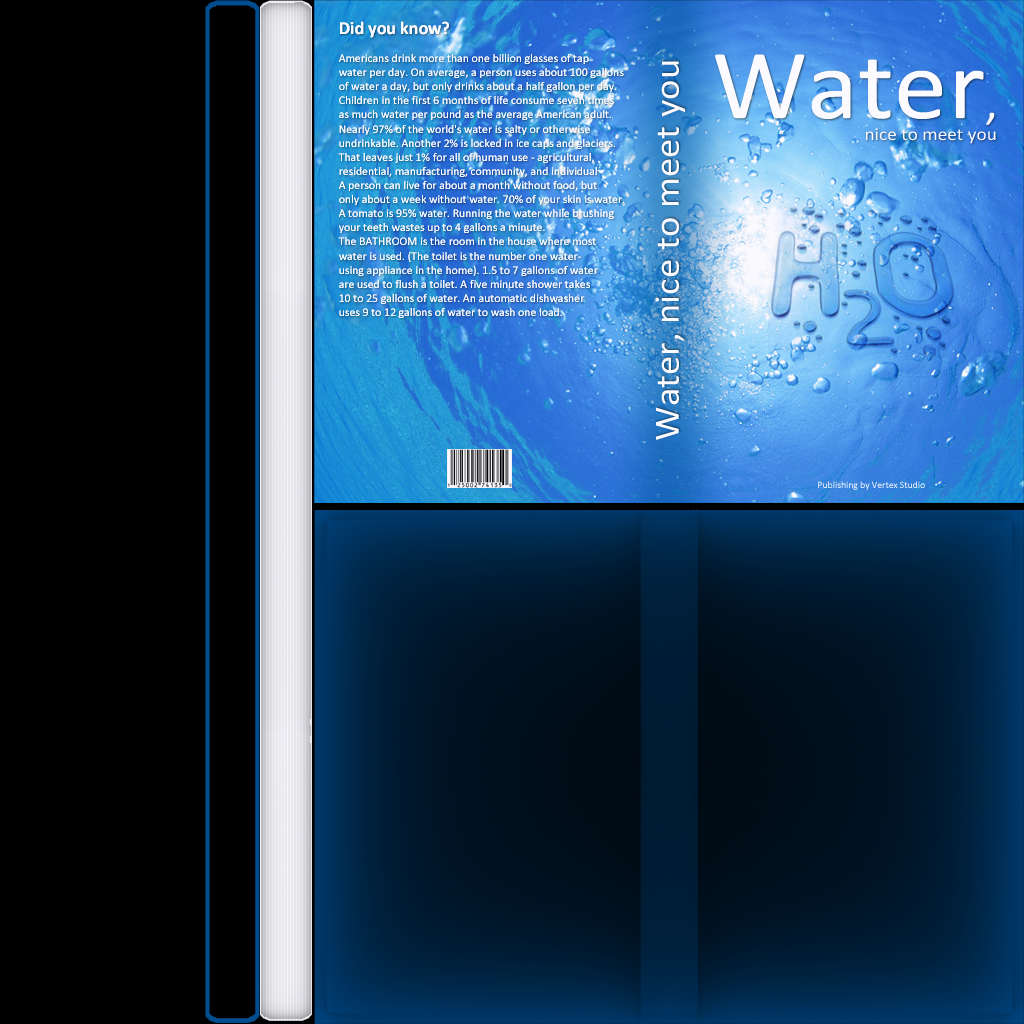
<style>
.page{position:relative;width:1024px;height:1024px;background:#000000}
.page>*{position:absolute;margin:0}
.t1{font:11.8px "Calibri";color:#ffffff}
.t2{font:18px "Calibri-Bold";color:#ffffff}
.t3{font:18px "Calibri";color:#ffffff;scale:1.07 1}
.t4{font:100px "Calibri";color:#ffffff;scale:1.07 1}
.t5{font:47.6px "Calibri";color:#ffffff;scale:1.07 1}
.t6{font:36px "Calibri";color:#ffffff;scale:1.07 1}
.t7{font:9.7px "Calibri";color:#ffffff}
</style>
<div class="page">
<p class="t1" style="left:338px;top:21px;width:286px;height:297px"><span class="t2">Did you know?<br></span><br>Americans drink more than one billion glasses of tap <br>water per day. On average, a person uses about 100 gallons <br>of water a day, but only drinks about a half gallon per day.<br>Children in the first 6 months of life consume seven times <br>as much water per pound as the average American adult.<br>Nearly 97% of the world's water is salty or otherwise <br>undrinkable. Another 2% is locked in ice caps and glaciers.<br>That leaves just 1% for all of human use - agricultural, <br>residential, manufacturing, community, and individual<br>A person can live for about a month without food, but <br>only about a week without water. 70% of your skin is water.<br>A tomato is 95% water. Running the water while brushing <br>your teeth wastes up to 4 gallons a minute. <br>The BATHROOM is the room in the house where most <br>water is used. (The toilet is the number one water-<br>using appliance in the home). 1.5 to 7 gallons of water <br>are used to flush a toilet. A five minute shower takes <br>10 to 25 gallons of water. An automatic dishwasher <br>uses 9 to 12 gallons of water to wash one load.</p>
<p class="t1" style="left:338px;top:21px;width:286px;height:297px"><span class="t2">Did you know?<br></span><br>Americans drink more than one billion glasses of tap <br>water per day. On average, a person uses about 100 gallons <br>of water a day, but only drinks about a half gallon per day.<br>Children in the first 6 months of life consume seven times <br>as much water per pound as the average American adult.<br>Nearly 97% of the world's water is salty or otherwise <br>undrinkable. Another 2% is locked in ice caps and glaciers.<br>That leaves just 1% for all of human use - agricultural, <br>residential, manufacturing, community, and individual<br>A person can live for about a month without food, but <br>only about a week without water. 70% of your skin is water.<br>A tomato is 95% water. Running the water while brushing <br>your teeth wastes up to 4 gallons a minute. <br>The BATHROOM is the room in the house where most <br>water is used. (The toilet is the number one water-<br>using appliance in the home). 1.5 to 7 gallons of water <br>are used to flush a toilet. A five minute shower takes <br>10 to 25 gallons of water. An automatic dishwasher <br>uses 9 to 12 gallons of water to wash one load.</p>
<p class="t3" style="left:715px;top:54px;width:281px;height:90px"><span class="t4">Water</span><span class="t5">, <br></span>                                   nice to meet you</p>
<p class="t6" style="left:655px;top:61px;width:31px;height:379px;rotate:-90deg">Water, nice to meet you</p>
<p class="t7" style="left:818px;top:481px;width:107px;height:9px">Publishing by Vertex Studio</p>
</div>
